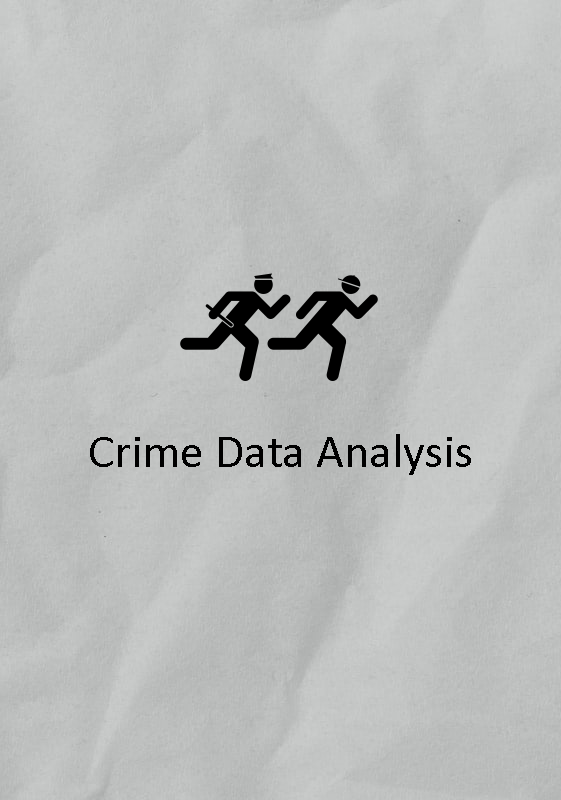
<style>
.page{position:relative;width:561px;height:800px}
.page>*{position:absolute;margin:0}
.t1{font:48px "Calibri";color:#000000}
</style>
<div class="page">
<p class="t1" style="left:90px;top:434px;width:381px;height:41px">Crime Data Analysis</p>
</div>
